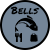
<style>
.page{position:relative;width:50px;height:50px;background:#748597}
.page>*{position:absolute;margin:0}
.t1{font:10px "PermanentMarker-Regular";color:#000000}
</style>
<div class="page">
<p class="t1" style="left:10px;top:6px;width:30px;height:9px">Bells</p>
</div>
